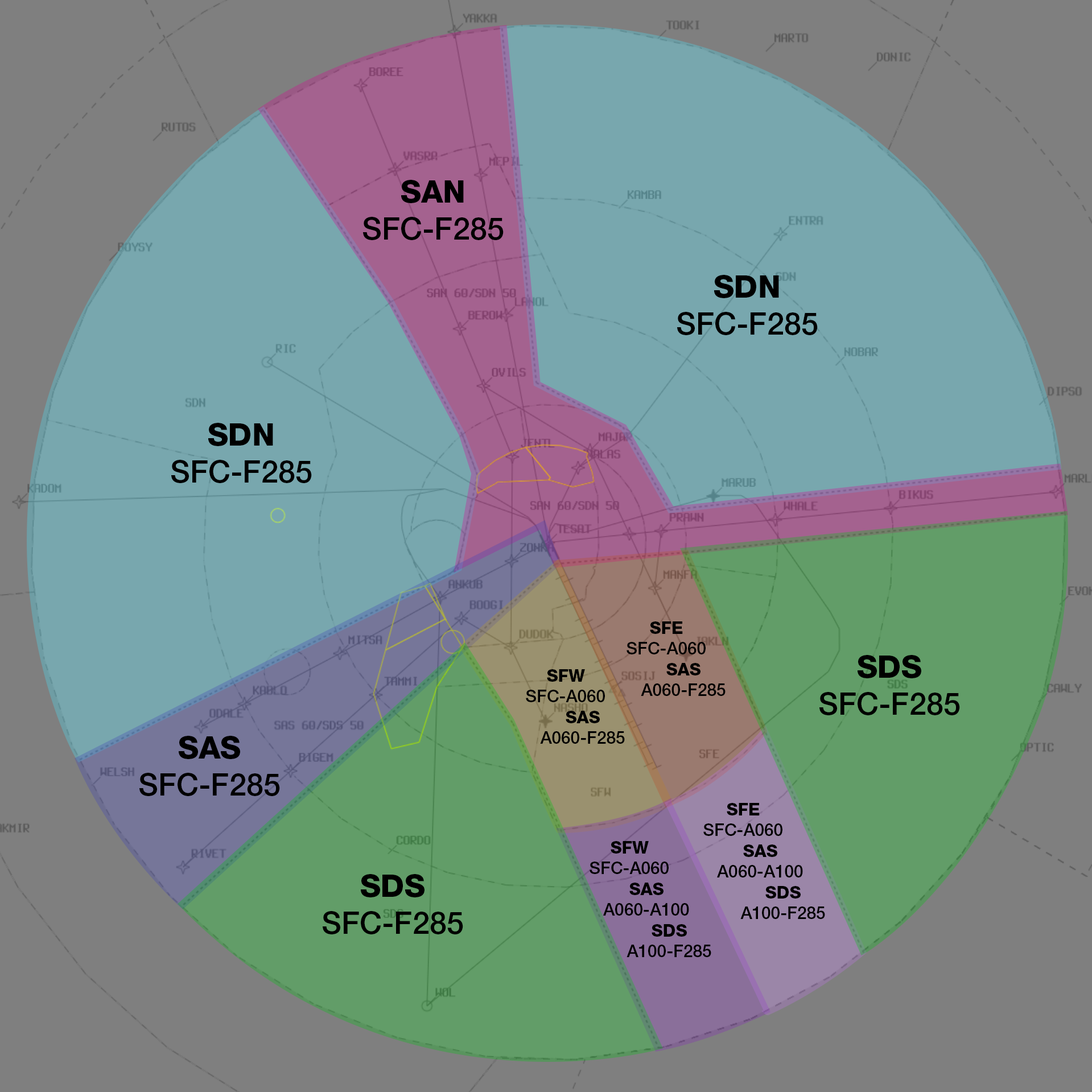
<style>
.page{position:relative;width:1092px;height:1092px;background:#7f7f7f}
.page>*{position:absolute;margin:0}
.t1{font:30.8px "HelveticaNeueLTStd-Md";color:#000000}
.t2{font:30.8px "HelveticaNeueLTStd-Hv";color:#000000}
.t3{font:17.1px "HelveticaNeueLTStd-Md";color:#000000}
.t4{font:17.1px "HelveticaNeueLTStd-Hv";color:#000000}
</style>
<div class="page">
<p class="t1" style="left:363px;top:180px;width:141px;height:60px;text-align:center"><span class="t2">SAN<br></span>SFC-F285</p>
<p class="t1" style="left:677px;top:275px;width:141px;height:60px;text-align:center"><span class="t2">SDN<br></span>SFC-F285</p>
<p class="t1" style="left:171px;top:423px;width:141px;height:60px;text-align:center"><span class="t2">SDN<br></span>SFC-F285</p>
<p class="t3" style="left:627px;top:621px;width:79px;height:33px;text-align:center"><span class="t4">SFE<br></span>SFC-A060</p>
<p class="t3" style="left:641px;top:663px;width:85px;height:33px;text-align:center"><span class="t4">SAS<br></span>A060-F285</p>
<p class="t1" style="left:819px;top:655px;width:141px;height:60px;text-align:center"><span class="t2">SDS<br></span>SFC-F285</p>
<p class="t3" style="left:526px;top:669px;width:79px;height:33px;text-align:center"><span class="t4">SFW<br></span>SFC-A060</p>
<p class="t3" style="left:540px;top:711px;width:85px;height:33px;text-align:center"><span class="t4">SAS<br></span>A060-F285</p>
<p class="t1" style="left:139px;top:736px;width:141px;height:60px;text-align:center"><span class="t2">SAS<br></span>SFC-F285</p>
<p class="t3" style="left:703px;top:803px;width:79px;height:33px;text-align:center"><span class="t4">SFE<br></span>SFC-A060</p>
<p class="t3" style="left:590px;top:841px;width:79px;height:33px;text-align:center"><span class="t4">SFW<br></span>SFC-A060</p>
<p class="t3" style="left:717px;top:844px;width:86px;height:33px;text-align:center"><span class="t4">SAS<br></span>A060-A100</p>
<p class="t1" style="left:323px;top:874px;width:140px;height:60px;text-align:center"><span class="t2">SDS<br></span>SFC-F285</p>
<p class="t3" style="left:603px;top:883px;width:86px;height:33px;text-align:center"><span class="t4">SAS<br></span>A060-A100</p>
<p class="t3" style="left:740px;top:886px;width:85px;height:33px;text-align:center"><span class="t4">SDS<br></span>A100-F285</p>
<p class="t3" style="left:627px;top:924px;width:84px;height:33px;text-align:center"><span class="t4">SDS<br></span>A100-F285</p>
</div>
